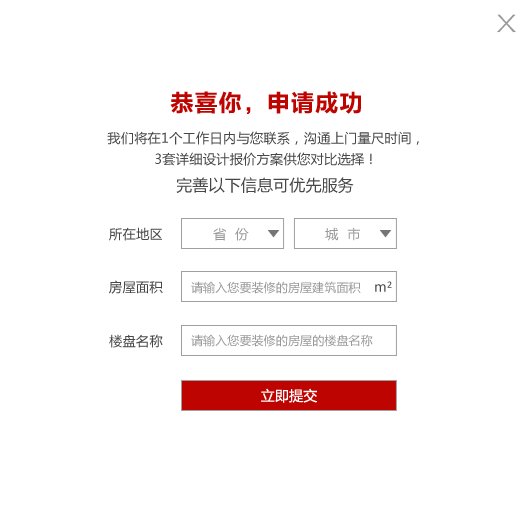
<style>
.page{position:relative;width:531px;height:526px;background:#ffffff}
.page>*{position:absolute;margin:0}
.t1{font:24px "FZFSFW--GB1-0";letter-spacing:0.005em;color:#989898;scale:2 1}
.t2{font:24px "FZLTCHK--GBK1-0";letter-spacing:0.005em;color:#bd0401}
.t3{font:13.3px/20.9px "MicrosoftYaHei";letter-spacing:0.01em;color:#474747}
.t4{font:16px "MicrosoftYaHei";letter-spacing:0.01em;color:#474747}
.t5{font:13.3px "MicrosoftYaHei";letter-spacing:0.01em;color:#474747}
.t6{font:13.3px "MicrosoftYaHei";letter-spacing:0.025em;color:#999999}
.t7{font:12px "MicrosoftYaHei";letter-spacing:0.01em;color:#999999}
.t8{font:14.1px "MicrosoftYaHei";letter-spacing:0.01em;color:#ffffff}
</style>
<div class="page">
<p class="t1" style="left:497px;top:14px;width:19px;height:19px">X</p>
<p class="t2" style="left:170px;top:91px;width:191px;height:23px">恭喜你，申请成功</p>
<p class="t3" style="left:107px;top:131px;width:312px;height:35px;text-align:center">我们将在1个工作日内与您联系，沟通上门量尺时间，<br>3套详细设计报价方案供您对比选择！</p>
<p class="t4" style="left:176px;top:177px;width:178px;height:17px">完善以下信息可优先服务</p>
<p class="t5" style="left:109px;top:227px;width:53px;height:14px">所在地区</p>
<p class="t6" style="left:213px;top:227px;width:36px;height:14px">省  份</p>
<p class="t6" style="left:325px;top:227px;width:35px;height:14px">城  市</p>
<p class="t5" style="left:109px;top:280px;width:54px;height:14px">房屋面积</p>
<p class="t7" style="left:191px;top:281px;width:170px;height:13px">请输入您要装修的房屋建筑面积</p>
<p class="t5" style="left:375px;top:281px;width:17px;height:11px">m²</p>
<p class="t5" style="left:109px;top:334px;width:54px;height:14px">楼盘名称</p>
<p class="t7" style="left:191px;top:334px;width:182px;height:13px">请输入您要装修的房屋的楼盘名称</p>
<p class="t8" style="left:261px;top:388px;width:56px;height:15px">立即提交</p>
</div>
